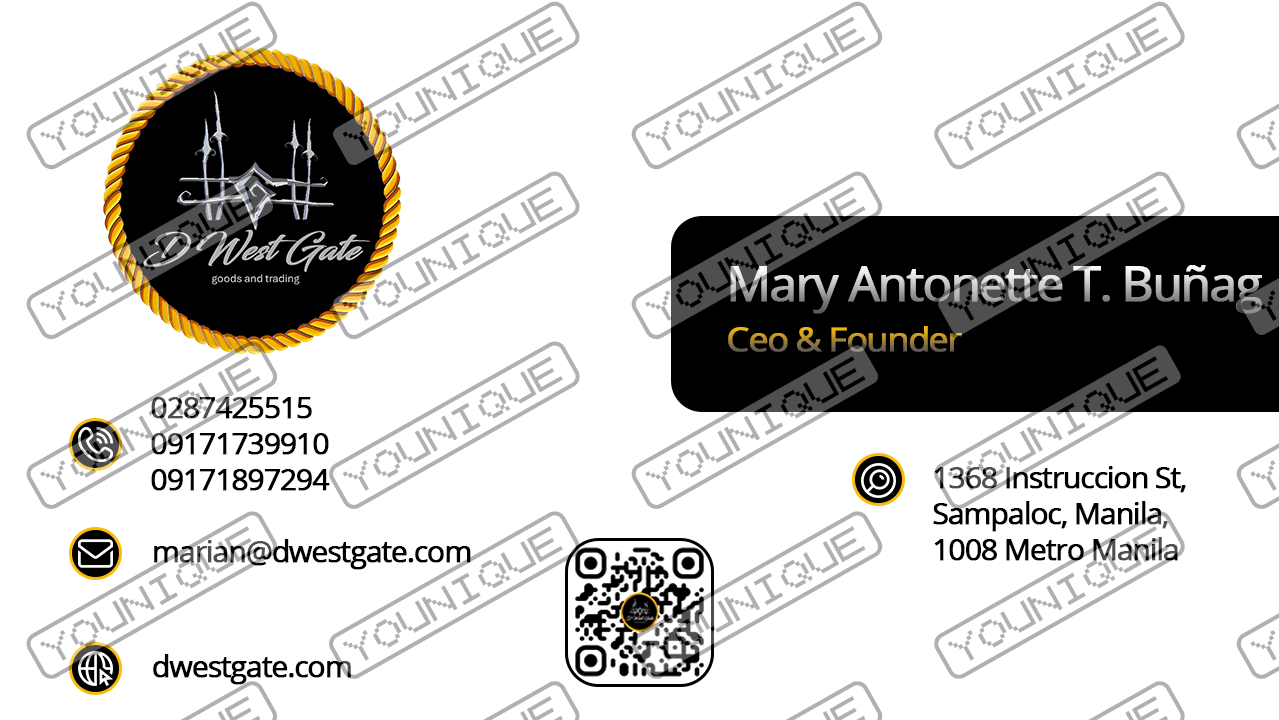
<style>
.page{position:relative;width:1279px;height:720px;background:#ffffff}
.page>*{position:absolute;margin:0}
.t1{font:49.3px "OpenSans";letter-spacing:-0.06em;font-weight:bold}
.t2{font:32.9px "OpenSans";letter-spacing:-0.06em;font-weight:bold;scale:1.09 1}
.t3{font:30px "OpenSans";letter-spacing:-0.06em;color:#000000;font-weight:bold}
</style>
<div class="page">
<p class="t1" style="left:730px;top:265px;width:532px;height:49px">Mary Antonette T. Buñag</p>
<p class="t2" style="left:728px;top:326px;width:234px;height:26px">Ceo &amp; Founder</p>
<p class="t3" style="left:151px;top:397px;width:179px;height:94px">0287425515<br>09171739910 <br>09171897294</p>
<p class="t3" style="left:933px;top:466px;width:253px;height:95px">1368 Instruccion St,<br>Sampaloc, Manila, <br>1008 Metro Manila</p>
<p class="t3" style="left:154px;top:539px;width:317px;height:31px">marian@dwestgate.com</p>
<p class="t3" style="left:153px;top:654px;width:198px;height:31px">dwestgate.com</p>
</div>
